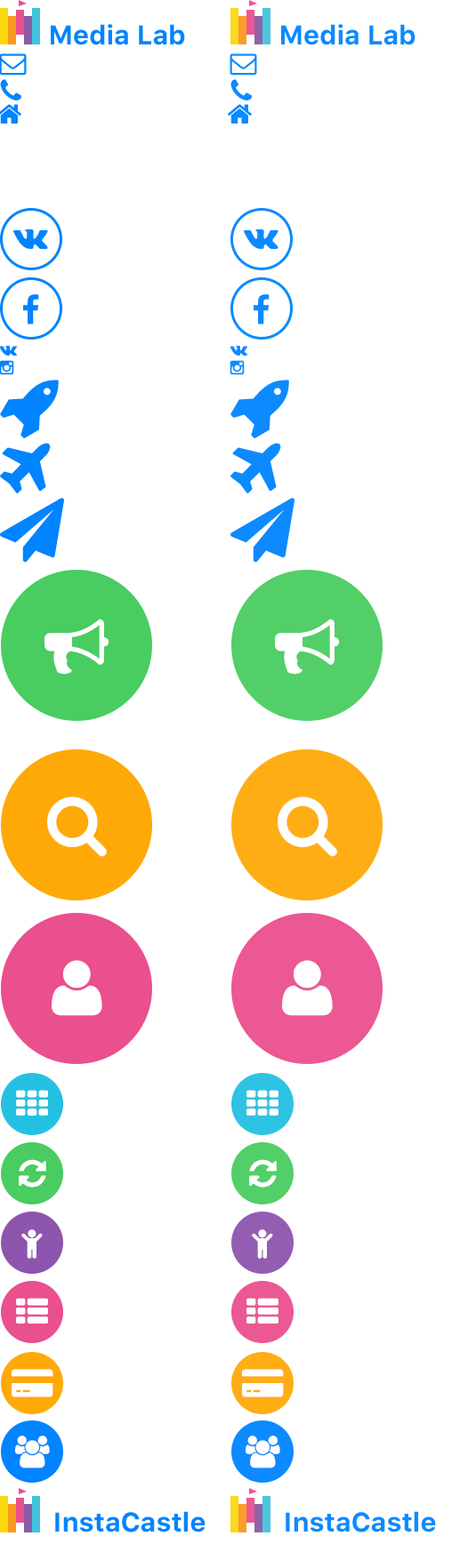
<style>
.page{position:relative;width:460px;height:1568px;background:#ffffff}
.page>*{position:absolute;margin:0}
.t1{font:26.7px "SFUIText-Bold";color:#0084ff}
</style>
<div class="page">
<p class="t1" style="left:51px;top:24px;width:134px;height:21px">Media Lab</p>
<p class="t1" style="left:55px;top:1511px;width:150px;height:21px">InstaCastle</p>
</div>
